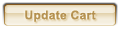
<style>
.page{position:relative;width:120px;height:30px;background:#ffffff}
.page>*{position:absolute;margin:0}
.t1{font:12px "Arial-BoldMT";letter-spacing:0.025em;color:#b59254}
</style>
<div class="page">
<p class="t1" style="left:25px;top:10px;width:71px;height:12px">Update Cart</p>
</div>
